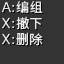
<style>
.page{position:relative;width:64px;height:64px;background:#333333}
.page>*{position:absolute;margin:0}
.t1{font:13px/16px "SourceHanSansSC-Regular";color:#e8e8e8}
</style>
<div class="page">
<p class="t1" style="left:16px;top:1px;width:27px;height:45px">编组<br>撤下<br>删除</p>
</div>
